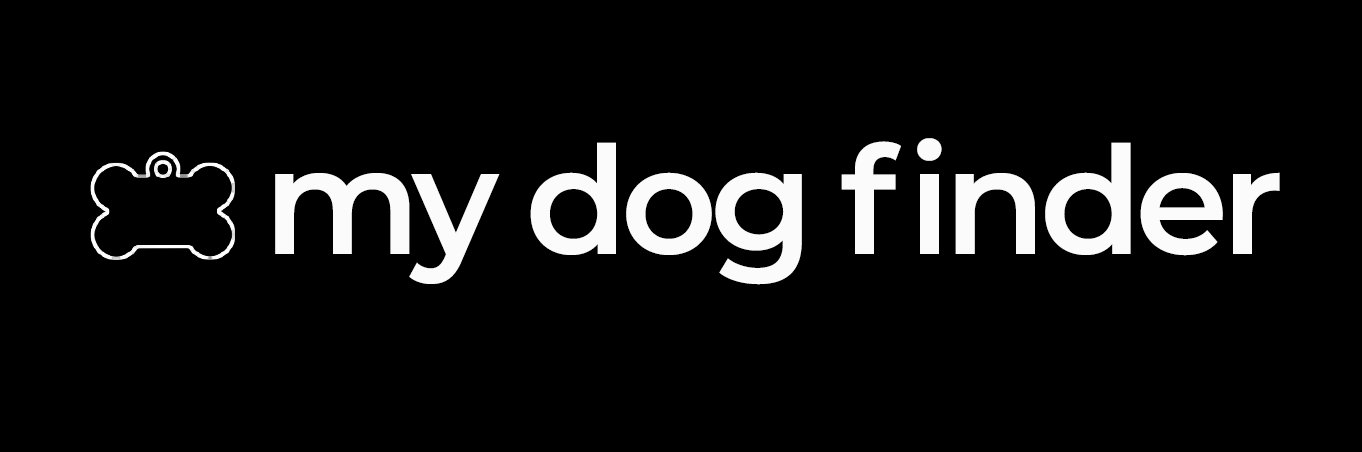
<style>
.page{position:relative;width:1362px;height:452px;background:#000000}
.page>*{position:absolute;margin:0}
.t1{font:150px "Montserrat-SemiBold";letter-spacing:-0.05em;color:#fbfbfb}
</style>
<div class="page">
<p class="t1" style="left:275px;top:138px;width:1005px;height:147px">my dog finder</p>
</div>
